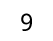
<style>
.page{position:relative;width:53px;height:41px;background:#ffffff}
.page>*{position:absolute;margin:0}
.t1{font:23.7px "DroidSans";color:#000000}
</style>
<div class="page">
<p class="t1" style="left:21px;top:13px;width:11px;height:18px">9</p>
</div>
